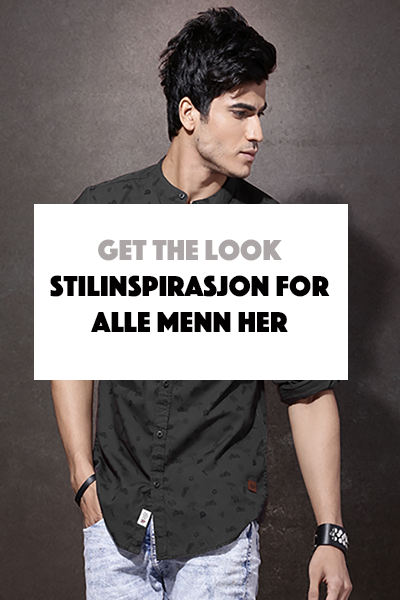
<style>
.page{position:relative;width:400px;height:600px}
.page>*{position:absolute;margin:0}
.t1{font:30px "Phosphate-Solid";color:#020000}
.t2{font:30px "Phosphate-Solid";color:#000000}
.t3{font:30px "Phosphate-Solid";color:#aca6a6}
</style>
<div class="page">
<p class="t1" style="left:50px;top:239px;width:280px;height:93px"><span class="t2"><br></span><span class="t3">Get the look<br></span>Stilinspirasjon for alle menn her</p>
</div>
